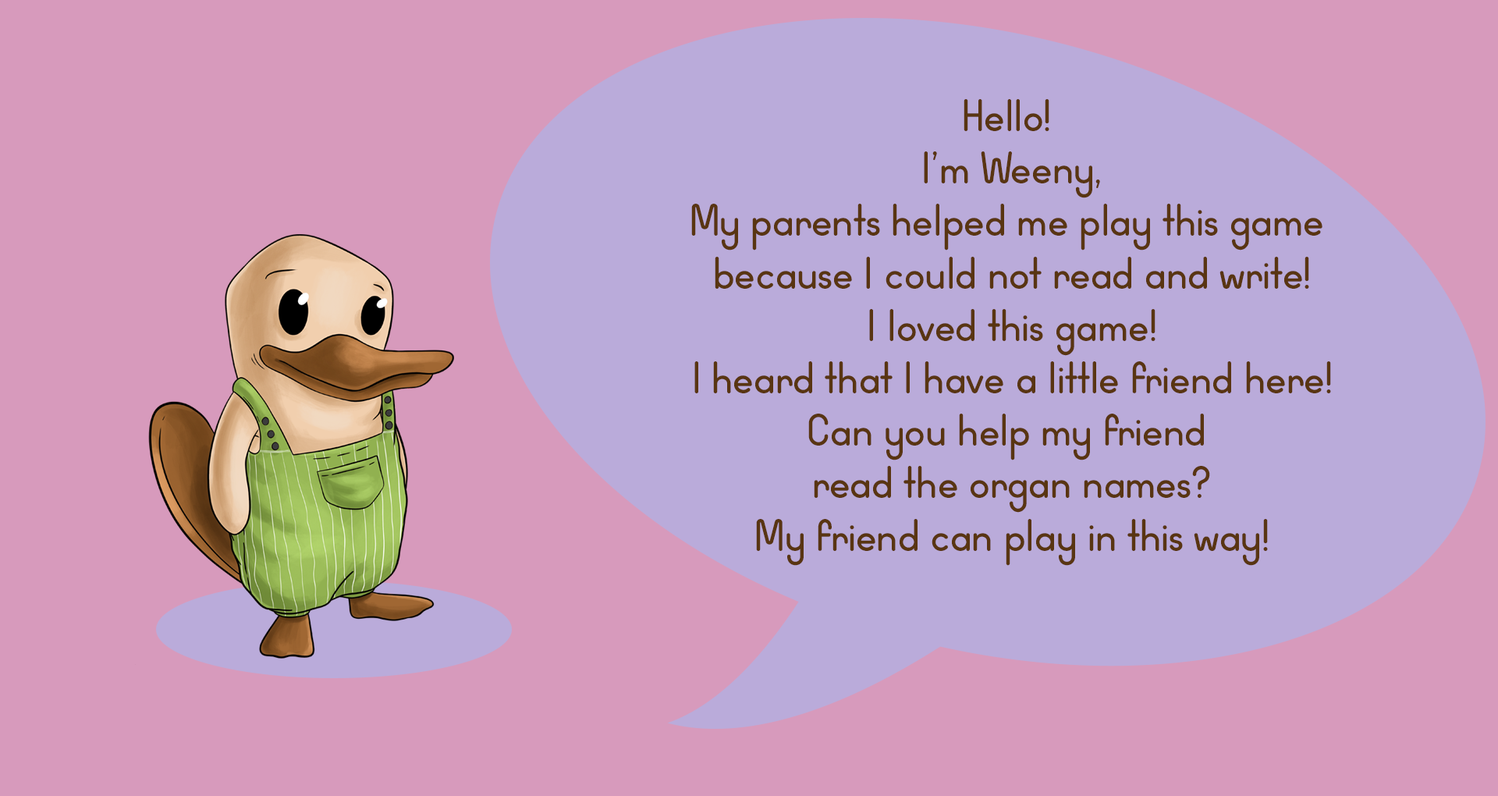
<style>
.page{position:relative;width:1498px;height:796px;background:#d79abc}
.page>*{position:absolute;margin:0}
.t1{font:43.7px "WidaRoundDemo";color:#593512}
</style>
<div class="page">
<p class="t1" style="left:691px;top:99px;width:640px;height:467px;text-align:center">Hello! <br>I’m Weeny,<br>My parents helped me play this game <br>because I could not read and write!<br>I loved this game!<br>I heard that I have a little friend here!<br>Can you help my friend <br>read the organ names?<br>My friend can play in this way!</p>
</div>
